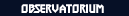
<style>
.page{position:relative;width:129px;height:16px;background:#061026}
.page>*{position:absolute;margin:0}
.t1{font:12px "MetalLord";color:#ffffff}
</style>
<div class="page">
<p class="t1" style="left:21px;top:4px;width:83px;height:9px">observatorium</p>
</div>
